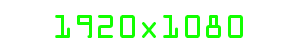
<style>
.page{position:relative;width:300px;height:50px;background:#ffffff}
.page>*{position:absolute;margin:0}
.t1{font:30px "OCRAStd";color:#12ff00}
</style>
<div class="page">
<p class="t1" style="left:55px;top:15px;width:188px;height:23px">1920x1080</p>
</div>
